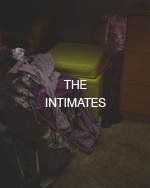
<style>
.page{position:relative;width:150px;height:188px}
.page>*{position:absolute;margin:0}
.t1{font:12px/18px "HelveticaNeue";color:#fefefe}
</style>
<div class="page">
<p class="t1" style="left:45px;top:80px;width:61px;height:27px;text-align:center">THE<br>INTIMATES</p>
</div>
